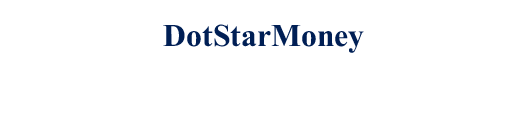
<style>
.page{position:relative;width:530px;height:136px;background:#ffffff}
.page>*{position:absolute;margin:0}
.t1{font:48px "AngsanaNew-Bold";color:#001f55}
</style>
<div class="page">
<p class="t1" style="left:163px;top:24px;width:201px;height:29px">DotStarMoney</p>
</div>
